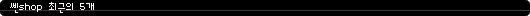
<style>
.page{position:relative;width:530px;height:16px;background:#000000}
.page>*{position:absolute;margin:0}
.t1{font:12px "nontoxic_ang_3";letter-spacing:0.01em;color:#ffffff}
</style>
<div class="page">
<p class="t1" style="left:10px;top:2px;width:84px;height:11px">쎈shop 최근의 5개</p>
</div>
